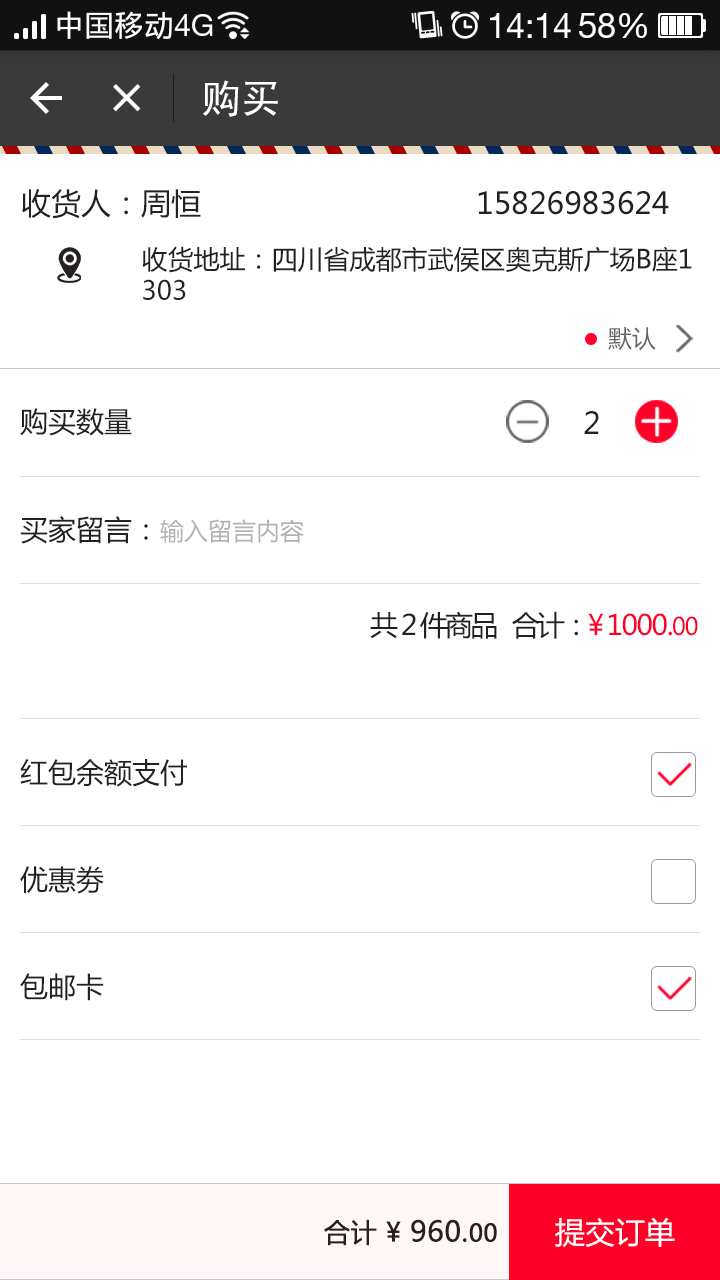
<style>
.page{position:relative;width:720px;height:1280px;background:#ffffff}
.page>*{position:absolute;margin:0}
.t1{font:40px "SimHei";color:#ffffff}
.t2{font:30px "MicrosoftYaHei";color:#242120}
.t3{font:26px "MicrosoftYaHei";color:#242120}
.t4{font:24px "MicrosoftYaHei";color:#666666}
.t5{font:28px "MicrosoftYaHei";color:#242120}
.t6{font:24px "MicrosoftYaHei";color:#b2b2b2}
.t7{font:28px "MicrosoftYaHei";letter-spacing:-0.1em;color:#242120}
.t8{font:28px "MicrosoftYaHei";letter-spacing:-0.1em;color:#ff0029}
.t9{font:28px "MicrosoftYaHei";letter-spacing:-0.05em;color:#ff0029}
.t10{font:24px "MicrosoftYaHei";letter-spacing:-0.05em;color:#ff0029}
.t11{font:30px "MicrosoftYaHei";color:#ffffff}
.t12{font:26px "MicrosoftYaHei";color:#242120;font-weight:bold}
.t13{font:28px "MicrosoftYaHei";color:#242120;font-weight:bold}
.t14{font:24px "MicrosoftYaHei";color:#242120;font-weight:bold}
</style>
<div class="page">
<p class="t1" style="left:203px;top:80px;width:75px;height:37px">购买</p>
<p class="t2" style="left:22px;top:189px;width:647px;height:30px">收货人：周恒                               15826983624</p>
<p class="t3" style="left:142px;top:246px;width:550px;height:54px">收货地址：四川省成都市武侯区奥克斯广场B座1<br>303</p>
<p class="t4" style="left:608px;top:327px;width:48px;height:24px">默认</p>
<p class="t5" style="left:20px;top:408px;width:112px;height:28px">购买数量</p>
<p class="t2" style="left:584px;top:411px;width:15px;height:23px">2</p>
<p class="t6" style="left:20px;top:516px;width:284px;height:28px"><span class="t5">买家留言：</span>输入留言内容</p>
<p class="t7" style="left:370px;top:611px;width:328px;height:28px">共 2 件商品   合计：<span class="t8">¥ </span><span class="t9">1000.</span><span class="t10">00</span></p>
<p class="t5" style="left:20px;top:759px;width:167px;height:28px">红包余额支付</p>
<p class="t5" style="left:20px;top:866px;width:84px;height:28px">优惠劵</p>
<p class="t5" style="left:20px;top:973px;width:84px;height:28px">包邮卡</p>
<p class="t11" style="left:555px;top:1217px;width:120px;height:30px">提交订单</p>
<p class="t12" style="left:324px;top:1219px;width:173px;height:27px">合计 ¥ <span class="t13">960</span>.<span class="t14">00</span></p>
</div>
